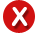
<style>
.page{position:relative;width:37px;height:34px;background:#ffffff}
.page>*{position:absolute;margin:0}
.t1{font:27.2px "ArialRoundedMTBold";color:#ffffff}
</style>
<div class="page">
<p class="t1" style="left:11px;top:7px;width:17px;height:19px">X</p>
</div>
